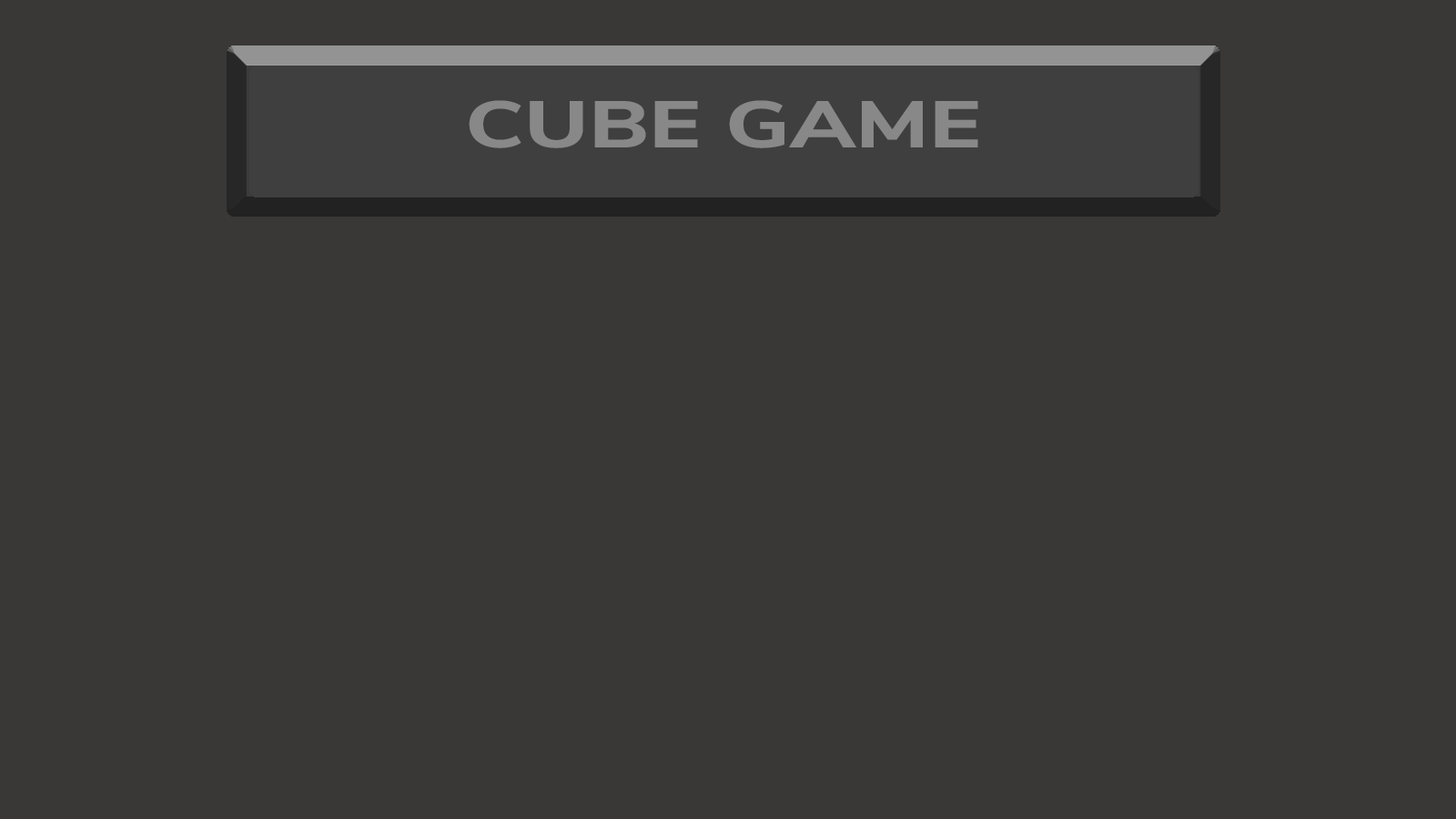
<style>
.page{position:relative;width:1456px;height:819px;background:#393837}
.page>*{position:absolute;margin:0}
.t1{font:65.8px "NunitoSans-ExtraBold";color:#888888;scale:1.33 1}
</style>
<div class="page">
<p class="t1" style="left:469px;top:100px;width:509px;height:48px">CUBE GAME</p>
</div>
